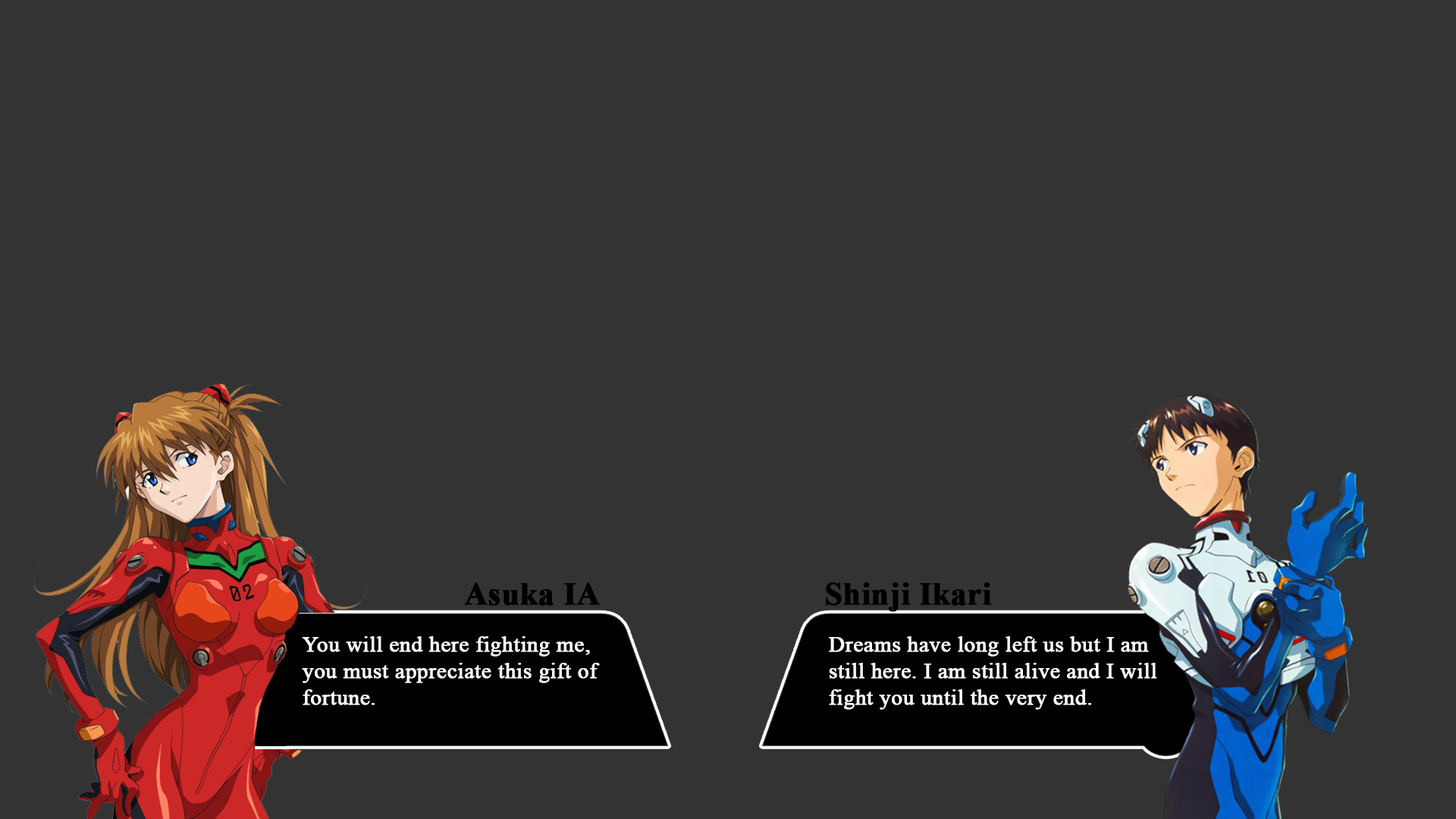
<style>
.page{position:relative;width:1456px;height:819px;background:#333333}
.page>*{position:absolute;margin:0}
.t1{font:31.6px "TimesNewRomanPS-BoldMT";color:#000000;font-weight:bold}
.t2{font:22.1px "TimesNewRomanPSMT";color:#ffffff;font-weight:bold}
</style>
<div class="page">
<p class="t1" style="left:464px;top:582px;width:136px;height:24px">Asuka IA</p>
<p class="t1" style="left:826px;top:582px;width:166px;height:30px">Shinji Ikari</p>
<p class="t2" style="left:302px;top:636px;width:298px;height:69px">You will end here fighting me, <br>you must appreciate this gift of <br>fortune.</p>
<p class="t2" style="left:829px;top:636px;width:328px;height:74px">Dreams have long left us but I am <br>still here. I am still alive and I will <br>fight you until the very end.</p>
</div>
